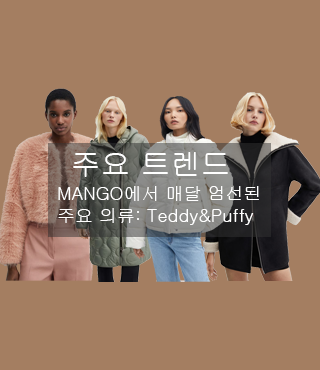
<style>
.page{position:relative;width:320px;height:370px;background:#a47e61}
.page>*{position:absolute;margin:0}
.t1{font:30px "Gulim";color:#ffffff}
.t2{font:18px "Gulim";color:#ffffff}
</style>
<div class="page">
<p class="t1" style="left:73px;top:152px;width:155px;height:25px">주요 트렌드</p>
<p class="t2" style="left:58px;top:186px;width:201px;height:39px">MANGO에서 매달 엄선된 <br>주요 의류: Teddy&amp;Puffy</p>
</div>
